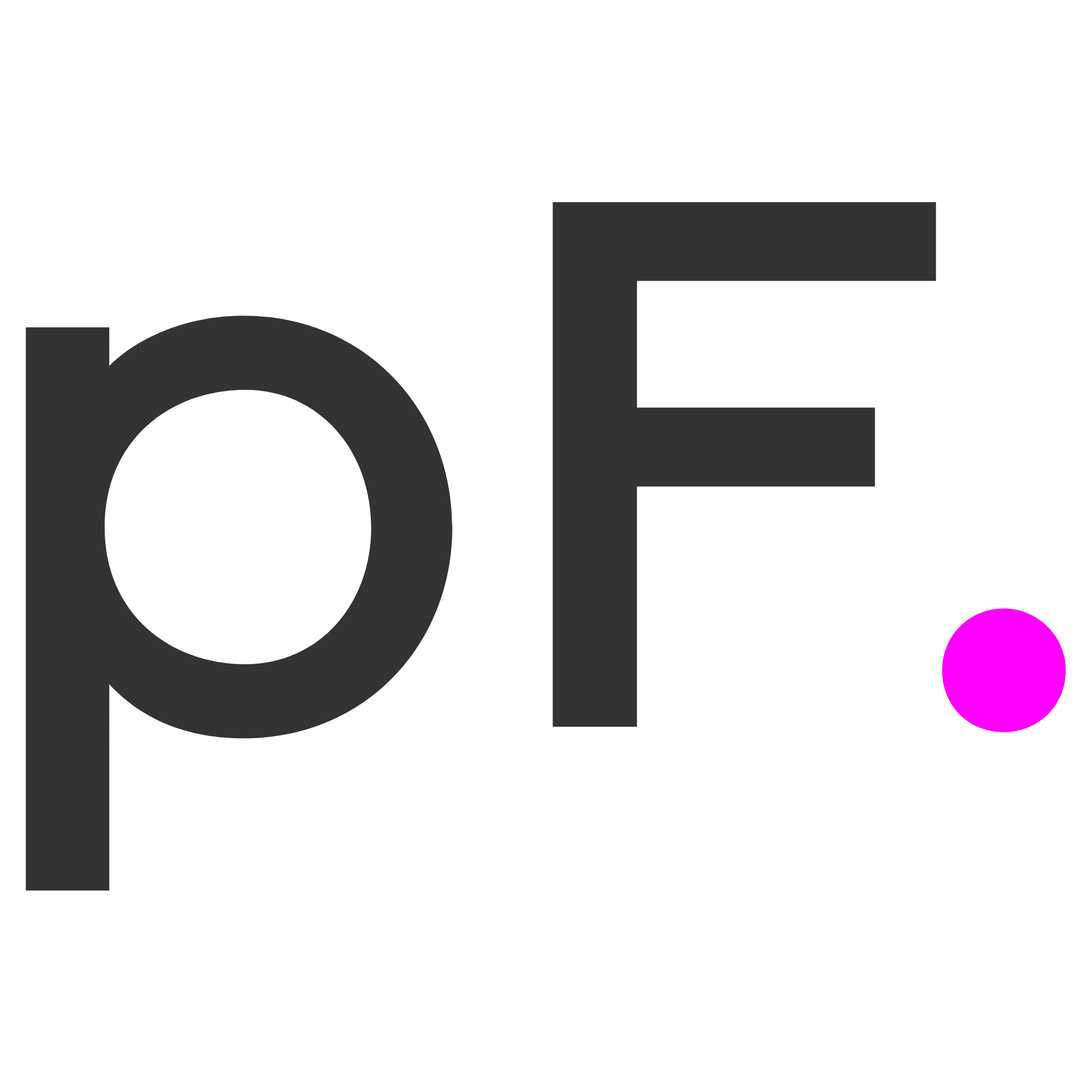
<style>
.page{position:relative;width:1092px;height:1092px;background:#ffffff}
.page>*{position:absolute;margin:0}
.t1{font:772.6px "Lack-Regular";color:#333333}
.t2{font:772.6px "Lack-Regular";color:#ff00ff}
</style>
<div class="page">
<p class="t1" style="left:26px;top:202px;width:1040px;height:689px">pF<span class="t2">.</span></p>
</div>
